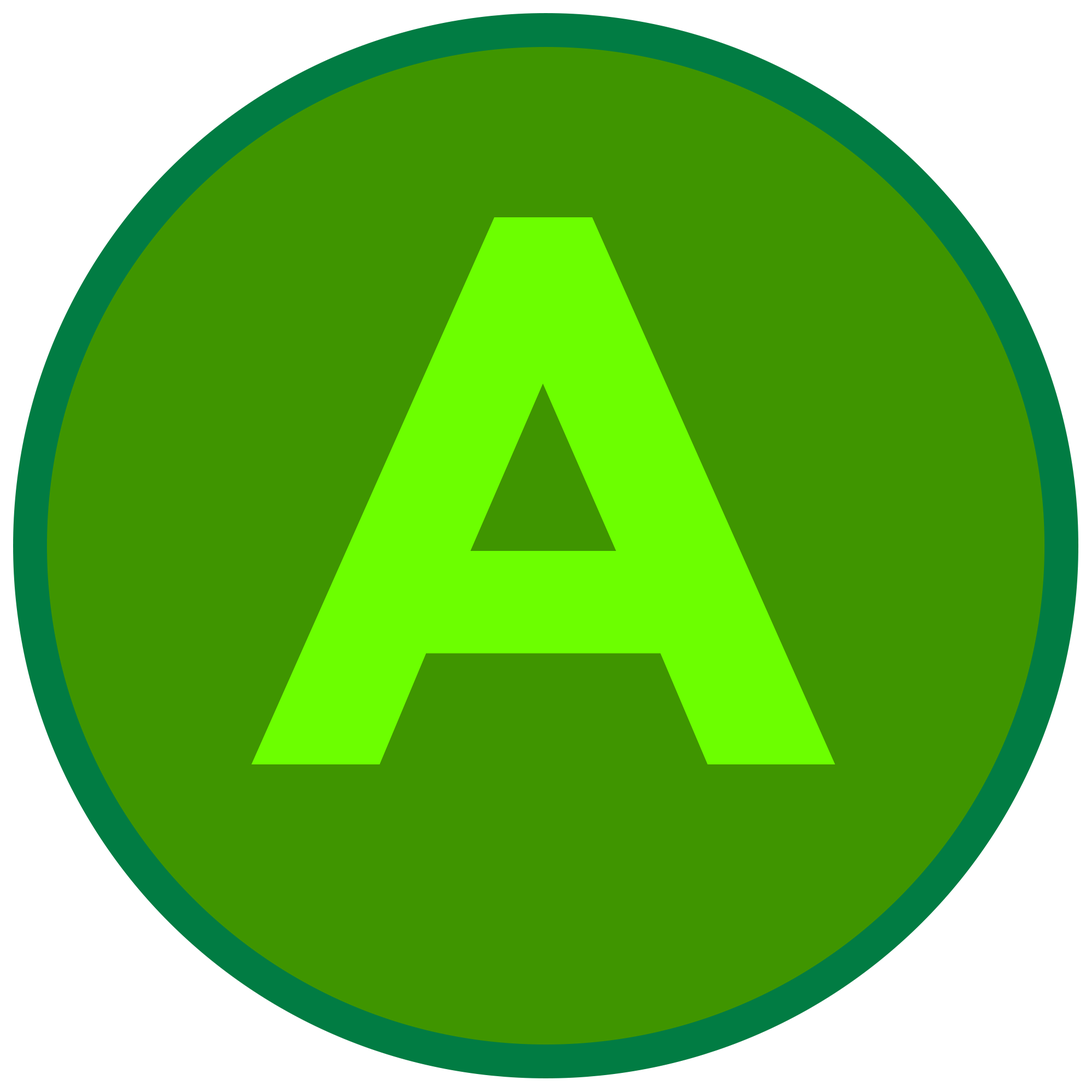
<style>
.page{position:relative;width:1092px;height:1092px;background:#3f9500}
.page>*{position:absolute;margin:0}
.t1{font:665px "RabbidHighwaySignII";color:#6cff00;scale:1.06 1}
</style>
<div class="page">
<p class="t1" style="left:251px;top:217px;width:584px;height:547px">A</p>
</div>
